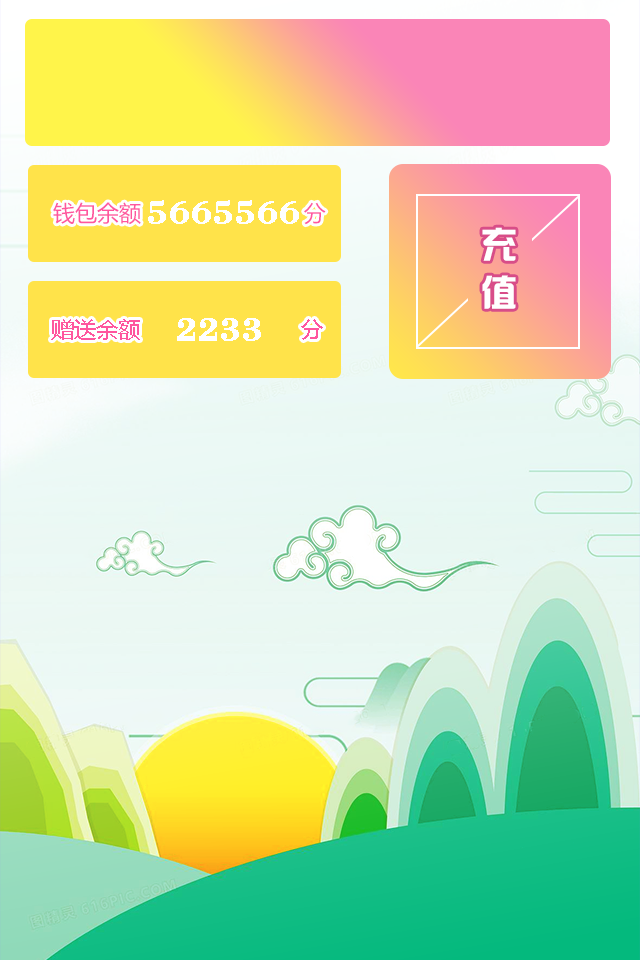
<style>
.page{position:relative;width:640px;height:960px}
.page>*{position:absolute;margin:0}
.t1{font:22px "MicrosoftYaHei";color:#ff569e}
.t2{font:34px "BodoniBT-Bold";color:#ffffff;font-weight:bold}
.t3{font:36px/48px "¹ã½Ý¾ÓÃÔÄã×Ö¿â";color:#ffffff}
</style>
<div class="page">
<p class="t1" style="left:53px;top:202px;width:273px;height:23px">钱包余额                         分</p>
<p class="t2" style="left:148px;top:200px;width:151px;height:24px">5665566</p>
<p class="t3" style="left:482px;top:227px;width:34px;height:82px;text-align:center">充<br>值</p>
<p class="t2" style="left:177px;top:318px;width:84px;height:23px">2233</p>
<p class="t1" style="left:51px;top:319px;width:272px;height:21px">赠送余额                       分</p>
</div>
